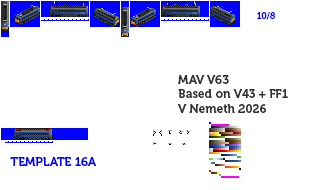
<style>
.page{position:relative;width:320px;height:190px;background:#ffffff}
.page>*{position:absolute;margin:0}
.t1{font:9px "Museo700-Regular";color:#0000ff}
.t2{font:12px "Museo700-Regular";color:#303030}
.t3{font:12px "Museo700-Regular";color:#0000ff}
</style>
<div class="page">
<p class="t1" style="left:257px;top:12px;width:18px;height:8px">10/8</p>
<p class="t2" style="left:178px;top:75px;width:110px;height:38px">MAV V63<br>Based on V43 + FF1<br>V Nemeth 2026</p>
<p class="t3" style="left:10px;top:157px;width:86px;height:9px">TEMPLATE 16A</p>
</div>
